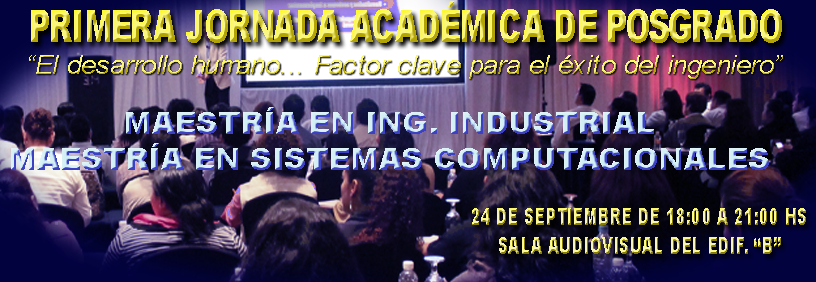
<style>
.page{position:relative;width:816px;height:282px}
.page>*{position:absolute;margin:0}
.t1{font:43.6px "Arial-Black";scale:0.69 1}
.t2{font:26.2px "Arial-ItalicMT"}
.t3{font:30px "Arial-Black"}
.t4{font:24.1px "Arial-Black";scale:0.63 1}
</style>
<div class="page">
<p class="t1" style="left:31px;top:1px;width:751px;height:42px">PRIMERA JORNADA ACADÉMICA DE POSGRADO</p>
<p class="t2" style="left:29px;top:55px;width:754px;height:24px">“El desarrollo humano... Factor clave para el éxito del ingeniero”</p>
<p class="t3" style="left:11px;top:107px;width:758px;height:63px;text-align:center">MAESTRÍA EN ING. INDUSTRIAL<br>MAESTRÍA EN SISTEMAS COMPUTACIONALES</p>
<p class="t4" style="left:472px;top:208px;width:334px;height:46px;text-align:center">24 DE SEPTIEMBRE DE 18:00 A 21:00 HS<br>SALA AUDIOVISUAL DEL EDIF. “B”</p>
</div>
